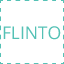
<style>
.page{position:relative;width:64px;height:64px;background:#ffffff}
.page>*{position:absolute;margin:0}
.t1{font:17.4px "OpenSans";color:#54c1b5}
</style>
<div class="page">
<p class="t1" style="left:3px;top:26px;width:58px;height:14px">FLINTO</p>
</div>
